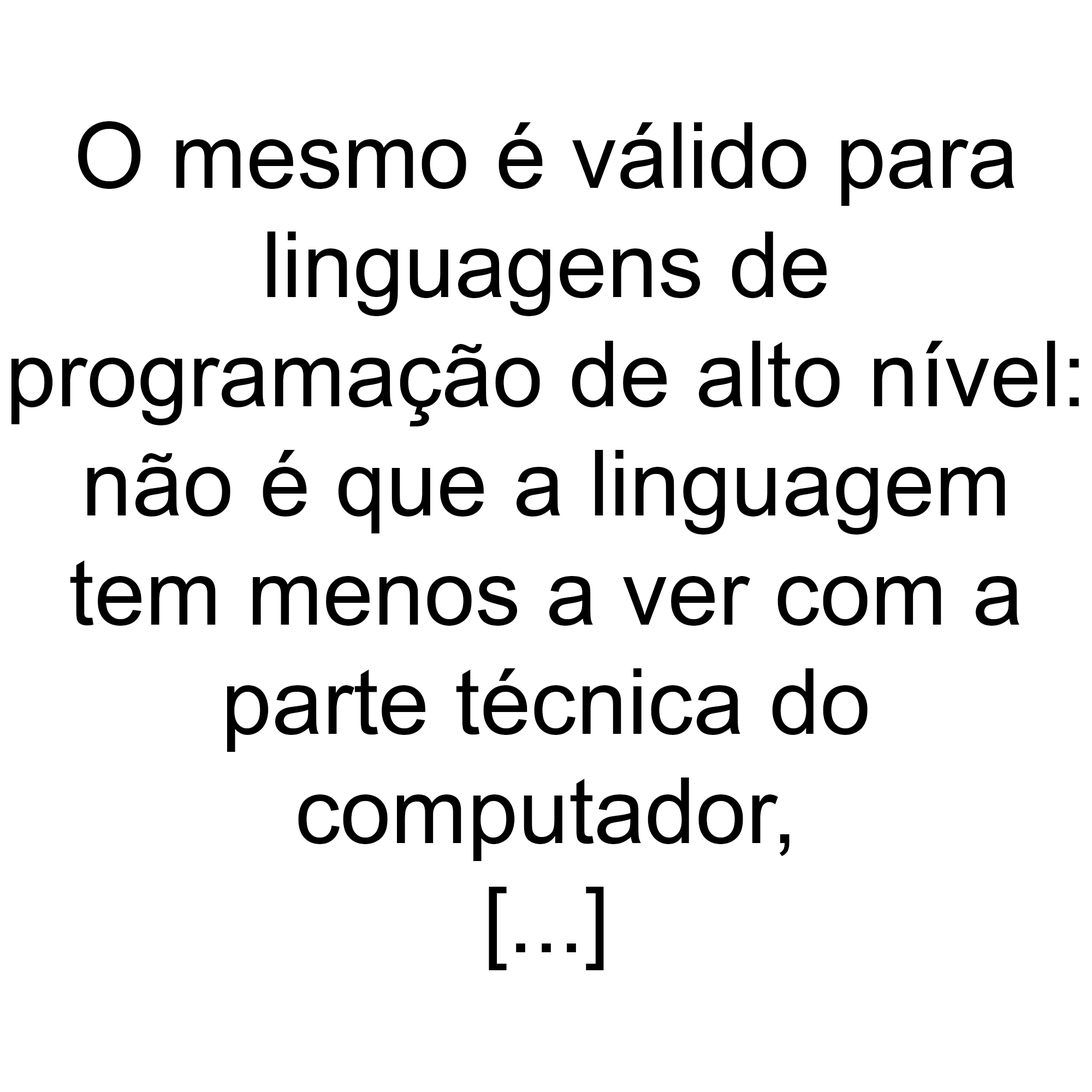
<style>
.page{position:relative;width:1092px;height:1092px;background:#ffffff}
.page>*{position:absolute;margin:0}
.t1{font:91px "ArialMT";color:#000000}
</style>
<div class="page">
<p class="t1" style="left:11px;top:121px;width:1068px;height:849px;text-align:center">O mesmo é válido para<br>linguagens de<br>programação de alto nível:<br>não é que a linguagem<br>tem menos a ver com a<br>parte técnica do<br>computador,<br>[...]</p>
</div>
